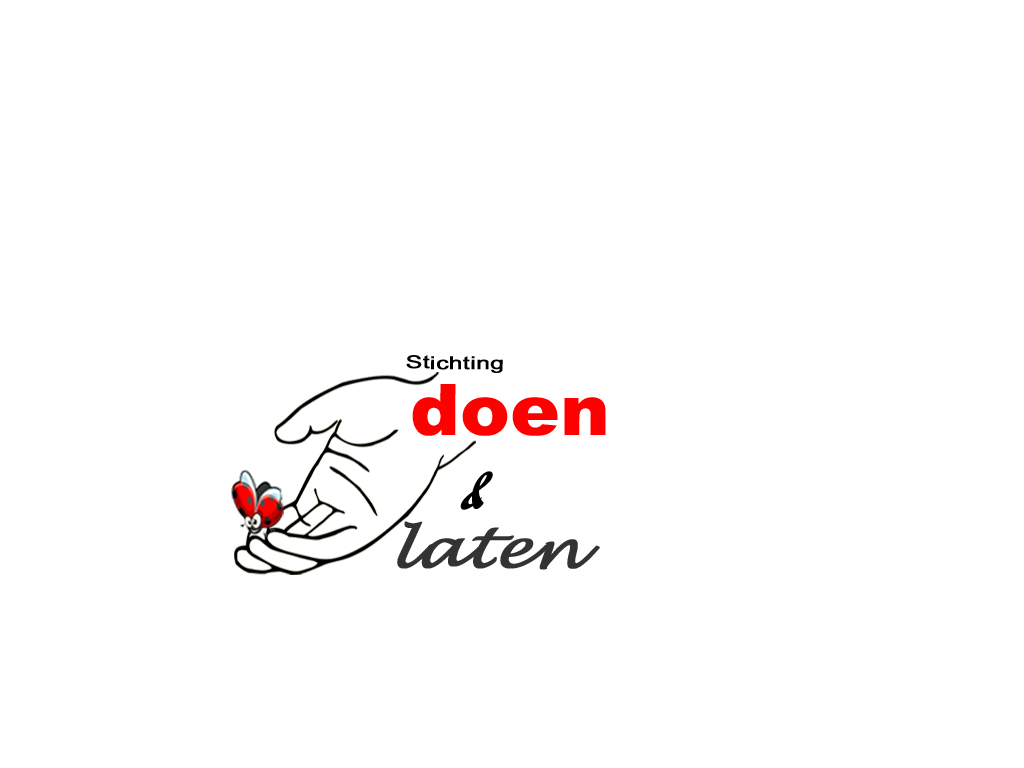
<style>
.page{position:relative;width:1024px;height:768px;background:#ffffff}
.page>*{position:absolute;margin:0}
.t1{font:17.8px "ArialMT";color:#000000;font-weight:bold;scale:1.36 1}
.t2{font:71.3px "Arial-Black";color:#ff0000;scale:1.05 1}
.t3{font:58.1px "ForteMT";color:#000000;font-style:italic;scale:0.71 1}
.t4{font:54.9px "LucidaHandwriting-Italic";color:#333333;font-weight:bold;scale:1.11 1}
</style>
<div class="page">
<p class="t1" style="left:406px;top:355px;width:97px;height:18px">Stichting</p>
<p class="t2" style="left:412px;top:384px;width:194px;height:52px">doen</p>
<p class="t3" style="left:460px;top:471px;width:33px;height:39px">&amp;</p>
<p class="t4" style="left:397px;top:521px;width:203px;height:49px">laten</p>
</div>
